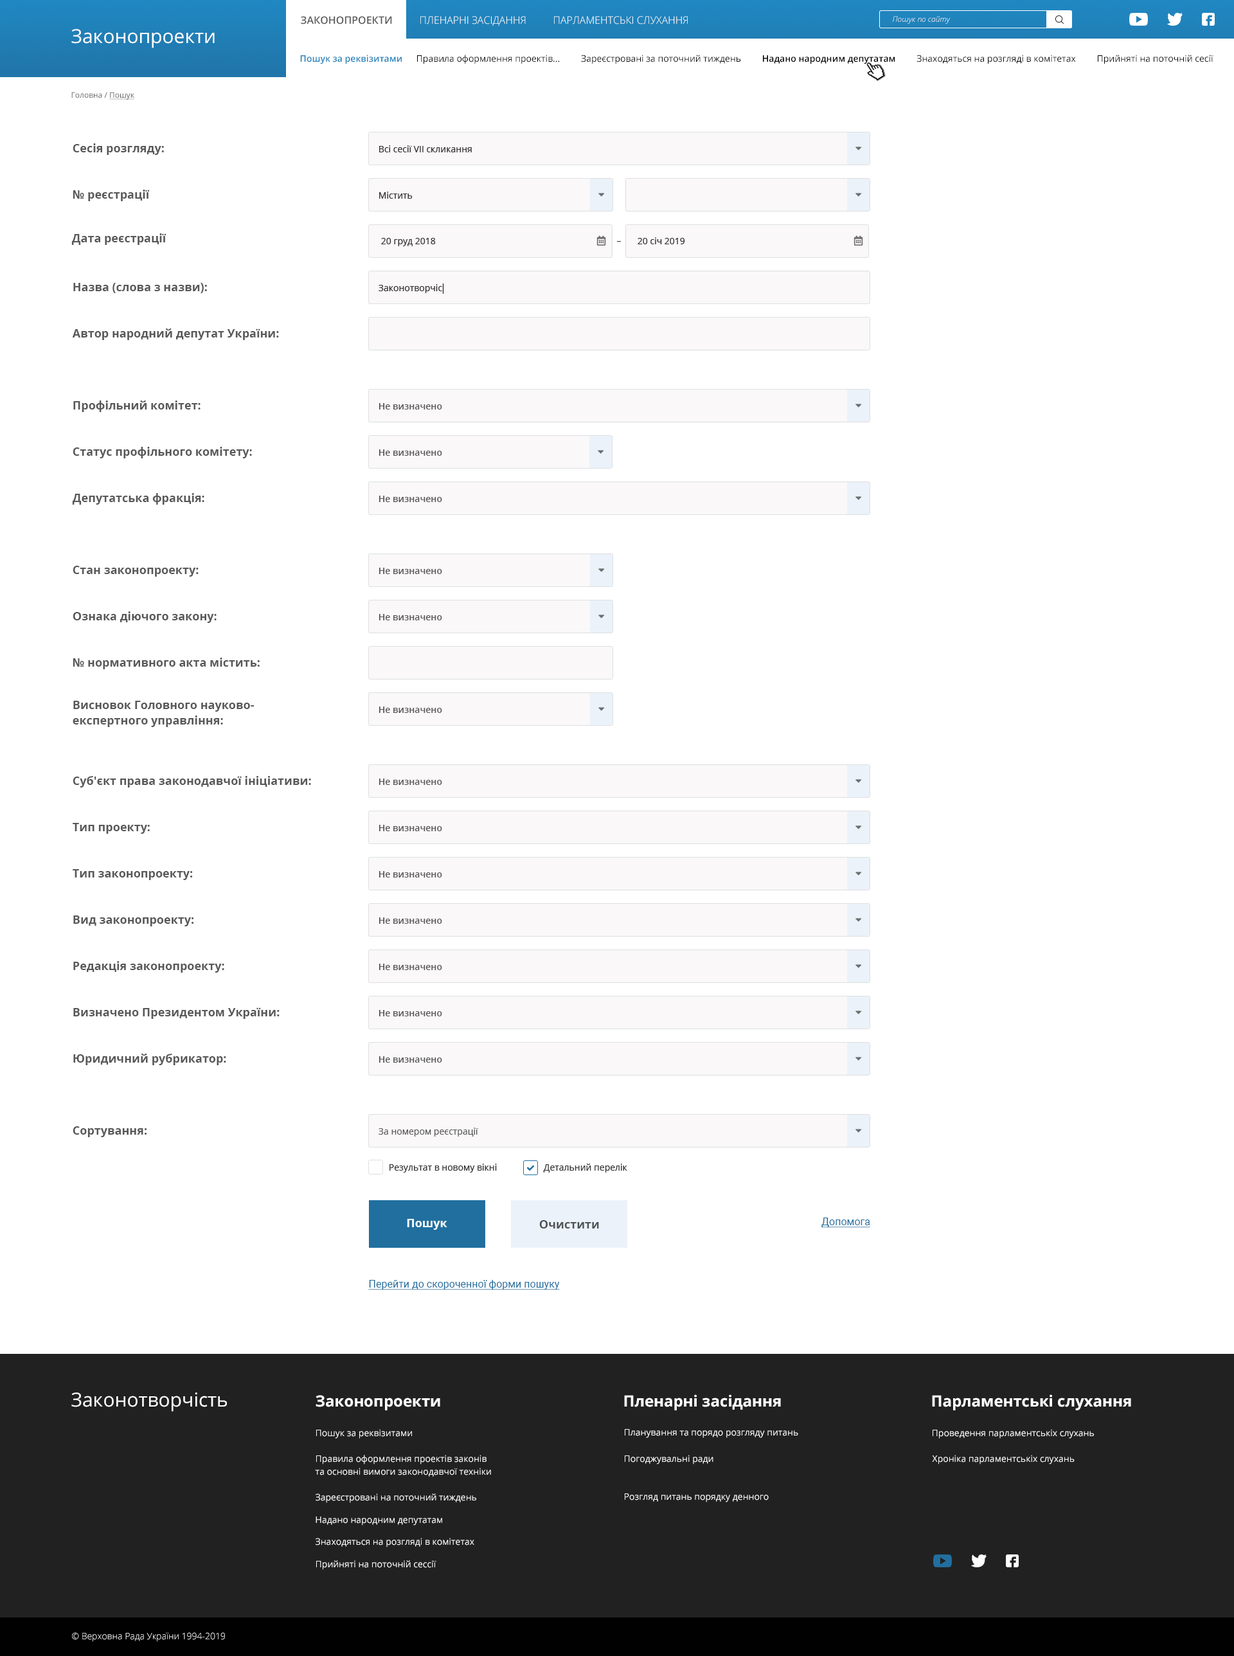
<style>
.page{position:relative;width:1234px;height:1656px;background:#ffffff}
.page>*{position:absolute;margin:0}
.t1{font:10.3px "OpenSans-SemiBold";color:#585858;text-transform:uppercase}
.t2{font:10.3px "OpenSans-Light";color:#ffffff;text-transform:uppercase}
.t3{font:7.7px "OpenSans-LightItalic";color:#ffffff}
.t4{font:19.3px "OpenSans-Regular";color:#ffffff}
.t5{font:9px "OpenSans-SemiBold";color:#2083bb}
.t6{font:9px "OpenSans-Regular";color:#000000}
.t7{font:9px "OpenSans-SemiBold";color:#000000}
.t8{font:7.7px "OpenSans-Regular";color:#585858}
.t9{font:7.7px "OpenSans-Regular";color:#585858;text-decoration:underline}
.t10{font:11.6px "OpenSans-Bold";color:#585858}
.t11{font:9px "OpenSans";color:#323232}
.t12{font:9px "OpenSans-SemiBold";color:#565555}
.t13{font:11.6px/15.4px "OpenSans-Bold";color:#585858}
.t14{font:9px "OpenSans-Regular";color:#565555}
.t15{font:9px "OpenSans";color:#333333}
.t16{font:10.3px "Roboto-Regular";color:#216f9f;text-decoration:underline}
.t17{font:11.6px "OpenSans-Bold";color:#ffffff}
.t18{font:11.6px "OpenSans-Bold";color:#505355}
.t19{font:15.4px "OpenSans-Bold";color:#ffffff}
.t20{font:9px "OpenSans-Regular";color:#ffffff}
.t21{font:9px/12.9px "OpenSans-Regular";color:#ffffff}
.t22{font:9px/16.7px "OpenSans-Regular";color:#ffffff}
.t23{font:9px "OpenSans-Light";color:#ffffff}
</style>
<div class="page">
<p class="t1" style="left:301px;top:16px;width:91px;height:8px">Законопроекти</p>
<p class="t2" style="left:420px;top:16px;width:106px;height:10px">пленарні засідання</p>
<p class="t2" style="left:554px;top:16px;width:134px;height:8px">парламентські слухання</p>
<p class="t3" style="left:893px;top:16px;width:58px;height:8px">Пошук по сайту</p>
<p class="t4" style="left:71px;top:29px;width:144px;height:19px">Законопроекти</p>
<p class="t5" style="left:300px;top:55px;width:102px;height:9px">Пошук за реквізитами</p>
<p class="t6" style="left:417px;top:55px;width:797px;height:9px">Правила оформлення проектів...         Зареєстровані за поточний тиждень         <span class="t7">Надано народним депутатам</span>         Знаходяться на розгляді в комітетах         Прийняті на поточній сесії</p>
<p class="t8" style="left:71px;top:92px;width:63px;height:8px">Головна / <span class="t9">Пошук</span></p>
<p class="t10" style="left:73px;top:143px;width:91px;height:12px">Сесія розгляду:</p>
<p class="t11" style="left:379px;top:145px;width:93px;height:7px">Всі сесії VII скликання</p>
<p class="t10" style="left:73px;top:190px;width:77px;height:11px">№ реєстрацiї</p>
<p class="t11" style="left:379px;top:192px;width:34px;height:7px">Містить</p>
<p class="t10" style="left:71px;top:233px;width:95px;height:12px">Дата реєстрацiї</p>
<p class="t11" style="left:381px;top:238px;width:55px;height:8px">20 груд 2018</p>
<p class="t11" style="left:638px;top:237px;width:47px;height:7px">20 січ 2019</p>
<p class="t10" style="left:73px;top:283px;width:134px;height:10px">Назва (слова з назви):</p>
<p class="t11" style="left:379px;top:284px;width:63px;height:9px">Законотворчіс</p>
<p class="t10" style="left:72px;top:328px;width:207px;height:12px">Автор народний депутат України:</p>
<p class="t10" style="left:73px;top:401px;width:128px;height:11px">Профільний комітет:</p>
<p class="t12" style="left:379px;top:403px;width:63px;height:7px">Не визначено</p>
<p class="t10" style="left:73px;top:447px;width:179px;height:11px">Статус профільного комітету:</p>
<p class="t12" style="left:379px;top:449px;width:63px;height:7px">Не визначено</p>
<p class="t10" style="left:72px;top:493px;width:132px;height:12px">Депутатська фракція:</p>
<p class="t12" style="left:379px;top:496px;width:63px;height:6px">Не визначено</p>
<p class="t10" style="left:73px;top:566px;width:126px;height:11px">Стан законопроекту:</p>
<p class="t12" style="left:379px;top:568px;width:63px;height:6px">Не визначено</p>
<p class="t10" style="left:73px;top:611px;width:144px;height:12px">Ознака діючого закону:</p>
<p class="t12" style="left:379px;top:614px;width:63px;height:6px">Не визначено</p>
<p class="t10" style="left:73px;top:658px;width:187px;height:11px">№ нормативного акта містить:</p>
<p class="t13" style="left:73px;top:701px;width:181px;height:26px">Висновок Головного науково-<br>експертного управління:</p>
<p class="t12" style="left:379px;top:706px;width:63px;height:7px">Не визначено</p>
<p class="t10" style="left:73px;top:776px;width:238px;height:12px">Суб'єкт права законодавчої ініціативи:</p>
<p class="t12" style="left:379px;top:779px;width:63px;height:6px">Не визначено</p>
<p class="t10" style="left:73px;top:823px;width:77px;height:11px">Тип проекту:</p>
<p class="t12" style="left:379px;top:825px;width:63px;height:6px">Не визначено</p>
<p class="t10" style="left:73px;top:869px;width:120px;height:11px">Tип законопроекту:</p>
<p class="t12" style="left:379px;top:871px;width:63px;height:7px">Не визначено</p>
<p class="t10" style="left:73px;top:915px;width:121px;height:11px">Вид законопроекту:</p>
<p class="t12" style="left:379px;top:917px;width:63px;height:7px">Не визначено</p>
<p class="t10" style="left:73px;top:961px;width:151px;height:12px">Редакція законопроекту:</p>
<p class="t12" style="left:379px;top:964px;width:63px;height:6px">Не визначено</p>
<p class="t10" style="left:73px;top:1007px;width:207px;height:12px">Визначено Президентом України:</p>
<p class="t12" style="left:379px;top:1010px;width:63px;height:6px">Не визначено</p>
<p class="t10" style="left:73px;top:1054px;width:153px;height:11px">Юридичний рубрикатор:</p>
<p class="t12" style="left:379px;top:1056px;width:63px;height:7px">Не визначено</p>
<p class="t10" style="left:73px;top:1126px;width:74px;height:11px">Сортування:</p>
<p class="t14" style="left:379px;top:1128px;width:100px;height:9px">За номером реєстрації</p>
<p class="t15" style="left:390px;top:1164px;width:107px;height:9px">Результат в новому вікні</p>
<p class="t15" style="left:543px;top:1164px;width:84px;height:9px">Детальний перелік</p>
<p class="t16" style="left:822px;top:1218px;width:48px;height:10px">Допомога</p>
<p class="t17" style="left:407px;top:1219px;width:40px;height:11px">Пошук</p>
<p class="t18" style="left:539px;top:1220px;width:60px;height:8px">Очистити</p>
<p class="t16" style="left:368px;top:1280px;width:192px;height:10px">Перейти до скороченної форми пошуку</p>
<p class="t4" style="left:71px;top:1392px;width:156px;height:20px">Законотворчість</p>
<p class="t19" style="left:316px;top:1395px;width:124px;height:15px">Законопроекти</p>
<p class="t19" style="left:624px;top:1394px;width:157px;height:16px">Пленарні засідання</p>
<p class="t19" style="left:932px;top:1394px;width:199px;height:16px">Парламентські слухання</p>
<p class="t20" style="left:316px;top:1429px;width:96px;height:10px">Пошук за реквізитами</p>
<p class="t20" style="left:625px;top:1429px;width:173px;height:9px">Планування та порядо розгляду питань</p>
<p class="t20" style="left:933px;top:1429px;width:161px;height:10px">Проведення парламентськіх слухань</p>
<p class="t21" style="left:315px;top:1455px;width:176px;height:22px"><span class="t22">Правила оформлення проектів законів<br></span>та основні вимоги законодавчої техніки</p>
<p class="t20" style="left:625px;top:1455px;width:89px;height:9px">Погоджувальні ради</p>
<p class="t20" style="left:932px;top:1455px;width:143px;height:9px">Хроніка парламентськіх слухань</p>
<p class="t20" style="left:316px;top:1493px;width:160px;height:10px">Зареєстровані на поточний тиждень</p>
<p class="t20" style="left:625px;top:1493px;width:144px;height:9px">Розгляд питань порядку денного</p>
<p class="t20" style="left:316px;top:1516px;width:126px;height:10px">Надано народним депутатам</p>
<p class="t20" style="left:316px;top:1538px;width:158px;height:9px">Знаходяться на розгляді в комітетах</p>
<p class="t20" style="left:316px;top:1560px;width:121px;height:10px">Прийняті на поточній сессії</p>
<p class="t23" style="left:72px;top:1632px;width:153px;height:10px">© Верховна Рада України 1994-2019</p>
</div>
